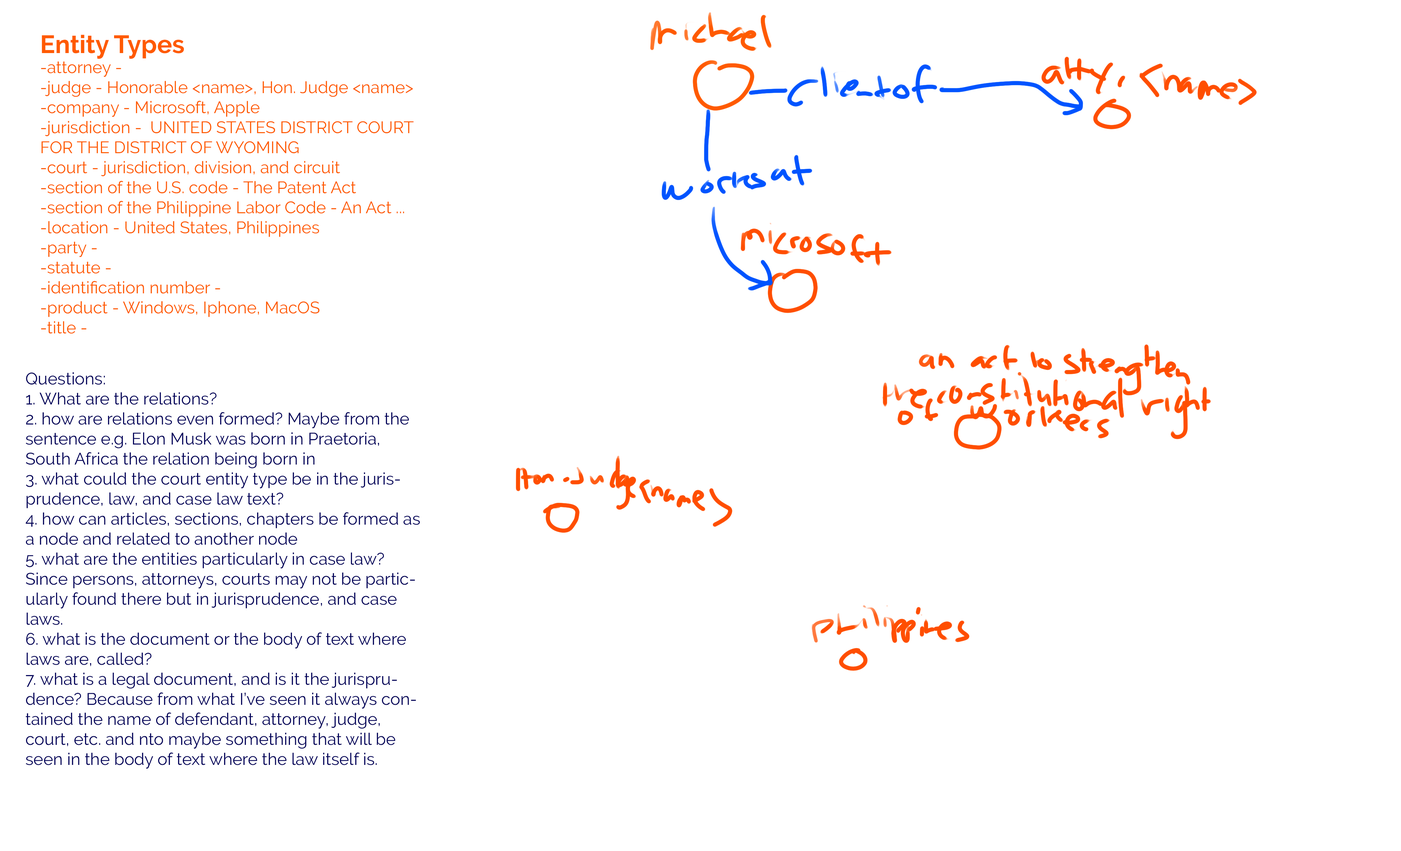
<style>
.page{position:relative;width:1401px;height:851px;background:#ffffff}
.page>*{position:absolute;margin:0}
.t1{font:16.7px "Raleway-Regular";color:#ff5a00}
.t2{font:25px "Raleway-Bold";color:#ff5a00}
.t3{font:16.7px "Raleway-Regular";color:#000059}
</style>
<div class="page">
<p class="t1" style="left:41px;top:35px;width:373px;height:299px"><span class="t2">Entity Types<br></span>-attorney -<br>-judge - Honorable &lt;name&gt;, Hon. Judge &lt;name&gt;<br>-company - Microsoft, Apple<br>-jurisdiction -  UNITED STATES DISTRICT COURT<br>FOR THE DISTRICT OF WYOMING<br>-court - jurisdiction, division, and circuit<br>-section of the U.S. code - The Patent Act<br>-section of the Philippine Labor Code - An Act ...<br>-location - United States, Philippines<br>-party - <br>-statute - <br>-identification number - <br>-product - Windows, Iphone, MacOS<br>-title -</p>
<p class="t3" style="left:26px;top:372px;width:394px;height:397px">Questions:<br>1. What are the relations?<br>2. how are relations even formed? Maybe from the sentence e.g. Elon Musk was born in Praetoria, South Africa the relation being born in<br>3. what could the court entity type be in the jurisprudence, law, and case law text?<br>4. how can articles, sections, chapters be formed as a node and related to another node<br>5. what are the entities particularly in case law? Since persons, attorneys, courts may not be particularly found there but in jurisprudence, and case laws.<br>6. what is the document or the body of text where laws are, called?<br>7. what is a legal document, and is it the jurisprudence? Because from what I’ve seen it always contained the name of defendant, attorney, judge, court, etc. and nto maybe something that will be seen in the body of text where the law itself is.</p>
</div>
